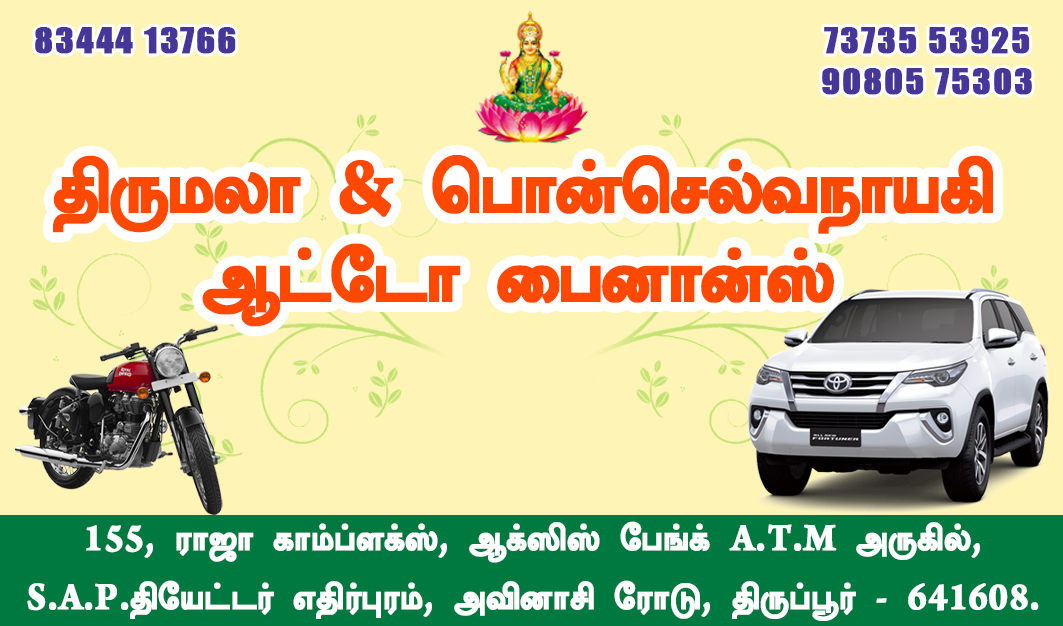
<style>
.page{position:relative;width:1063px;height:626px;background:#fef4b6}
.page>*{position:absolute;margin:0}
.t1{font:33.3px "Impact";letter-spacing:0.06em;color:#463699;font-weight:bold}
.t2{font:83.3px "Uni-Ila.Sundaram-03";letter-spacing:-0.03em;color:#ff4800;font-weight:bold;scale:0.91 1}
.t3{font:83.9px "Uni-Ila.Sundaram-03";letter-spacing:-0.03em;color:#ff4800;font-weight:bold;scale:0.91 1}
.t4{font:41.3px/58.4px "Uni-Ila.Sundaram-03";color:#ffffff;font-weight:bold;scale:0.89 1}
</style>
<div class="page">
<p class="t1" style="left:35px;top:27px;width:201px;height:27px">83444 13766</p>
<p class="t1" style="left:824px;top:27px;width:206px;height:27px">73735 53925</p>
<p class="t1" style="left:822px;top:68px;width:210px;height:27px">90805 75303</p>
<p class="t2" style="left:53px;top:155px;width:940px;height:79px">திருமலா &amp; பொன்செல்வநாயகி</p>
<p class="t3" style="left:202px;top:243px;width:632px;height:84px">ஆட்டோ பைனான்ஸ்</p>
<p class="t4" style="left:27px;top:521px;width:1012px;height:100px;text-align:center">155, ராஜா காம்ப்ளக்ஸ், ஆக்ஸிஸ் பேங்க் A.T.M அருகில், <br>S.A.P.தியேட்டர் எதிர்புரம், அவினாசி ரோடு, திருப்பூர் - 641608.</p>
</div>
